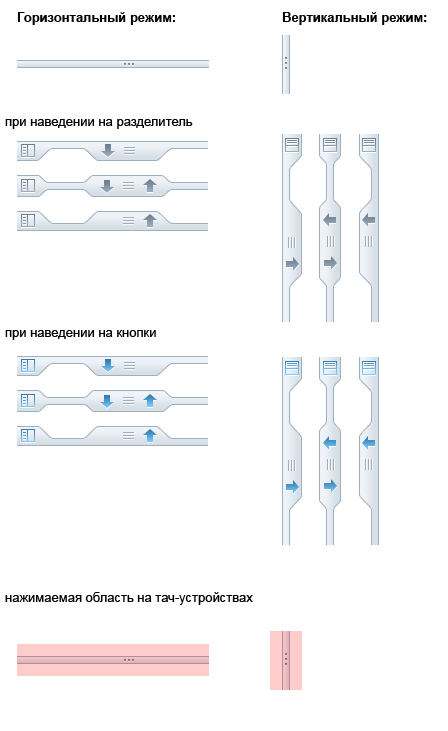
<style>
.page{position:relative;width:448px;height:731px;background:#ffffff}
.page>*{position:absolute;margin:0}
.t1{font:13px "Arial-BoldMT";color:#000000}
.t2{font:13px "ArialMT";color:#000000}
</style>
<div class="page">
<p class="t1" style="left:17px;top:12px;width:158px;height:13px">Горизонтальный режим:</p>
<p class="t1" style="left:282px;top:12px;width:145px;height:13px">Вертикальный режим:</p>
<p class="t2" style="left:5px;top:119px;width:188px;height:10px">при наведении на разделитель</p>
<p class="t2" style="left:5px;top:330px;width:151px;height:10px">при наведении на кнопки</p>
<p class="t2" style="left:5px;top:592px;width:248px;height:13px">нажимаемая область на тач-устройствах</p>
</div>
